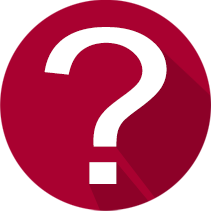
<style>
.page{position:relative;width:211px;height:211px;background:#a90130}
.page>*{position:absolute;margin:0}
.t1{font:215.6px "ArialMT";color:#ffffff;scale:1.22 1}
</style>
<div class="page">
<p class="t1" style="left:44px;top:27px;width:123px;height:157px">?</p>
</div>
